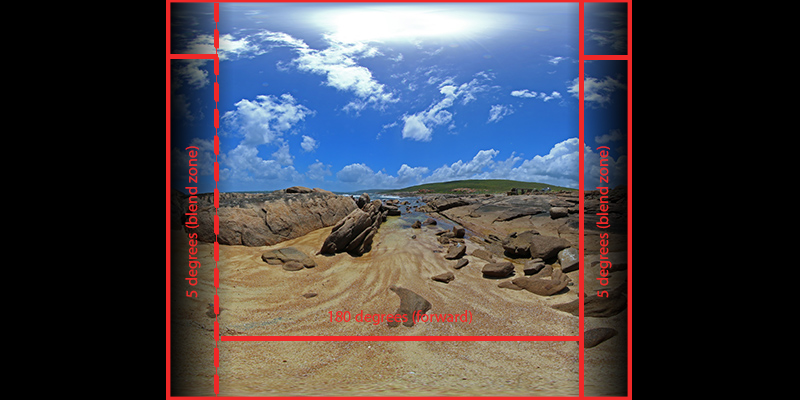
<style>
.page{position:relative;width:800px;height:400px;background:#000000}
.page>*{position:absolute;margin:0}
.t1{font:16px "MyriadPro-Regular";color:#f02828}
</style>
<div class="page">
<p class="t1" style="left:185px;top:146px;width:16px;height:152px;rotate:-90deg">5 degrees (blend zone)</p>
<p class="t1" style="left:596px;top:146px;width:16px;height:152px;rotate:-90deg">5 degrees (blend zone)</p>
<p class="t1" style="left:328px;top:310px;width:144px;height:15px">180 degrees (forward)</p>
</div>
